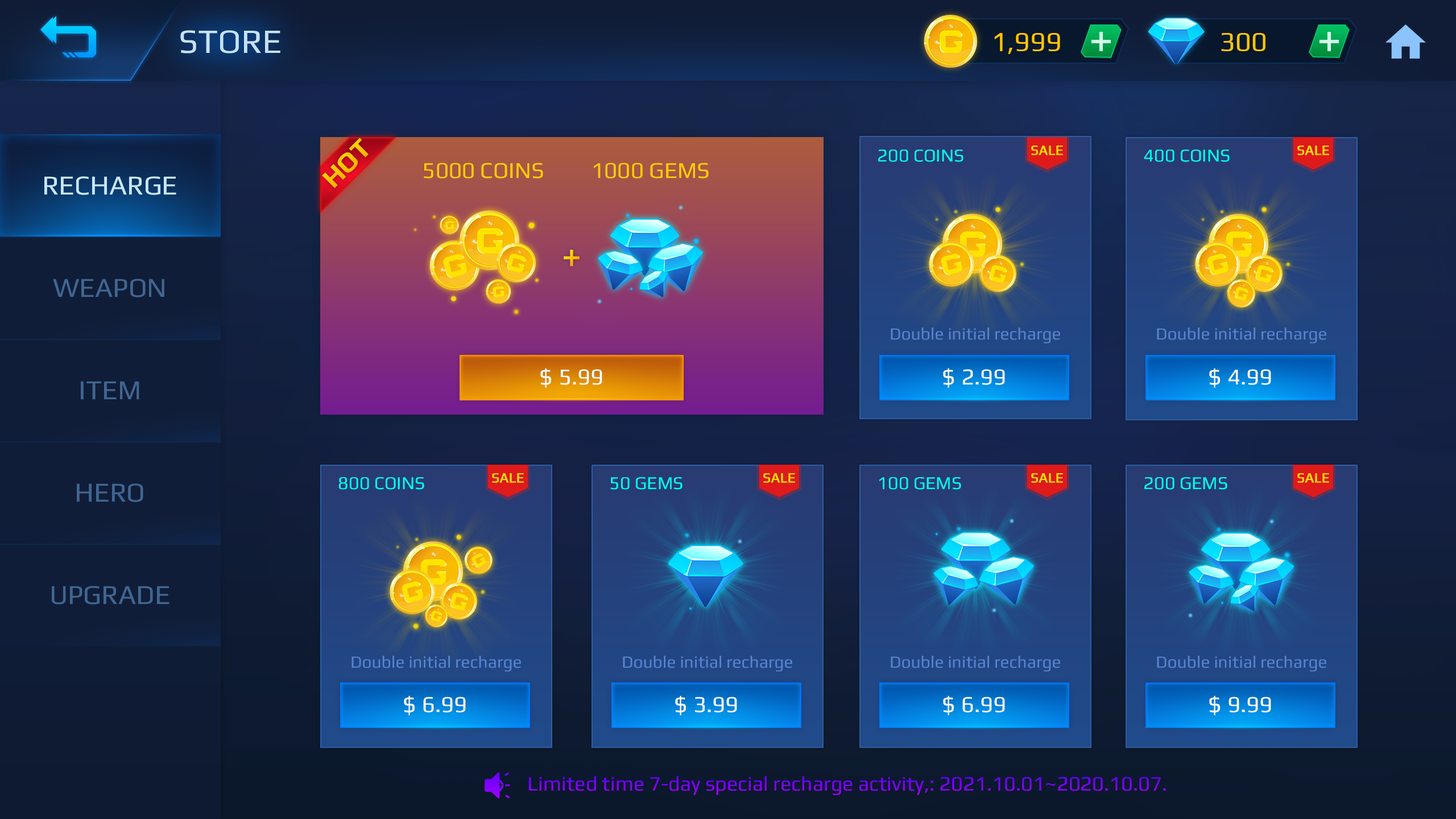
<style>
.page{position:relative;width:1456px;height:819px}
.page>*{position:absolute;margin:0}
.t1{font:34.1px "Play-Regular";color:#c6e1fc}
.t2{font:27.3px "Play-Regular";color:#ffc600}
.t3{font:27.3px "Play-Bold";color:#ffd200}
.t4{font:18.2px "Play-Regular";color:#00fff0}
.t5{font:13.6px "Play-Regular";color:#ffe400;font-weight:bold}
.t6{font:22.7px "Play-Regular";color:#ffcd00}
.t7{font:22.7px "Play-Regular";color:#ffcd01}
.t8{font:27.3px "Play-Regular";color:#c8e7ff}
.t9{font:40.9px "Play-Regular"}
.t10{font:27.3px "Play-Regular";color:#406691}
.t11{font:17.1px "Play-Regular";color:#5684cf}
.t12{font:22.7px "Play-Regular";color:#ffffff}
.t13{font:20.5px "Play-Regular";color:#7e00ff}
</style>
<div class="page">
<p class="t1" style="left:180px;top:30px;width:100px;height:23px">STORE</p>
<p class="t2" style="left:994px;top:33px;width:66px;height:21px">1,999</p>
<p class="t2" style="left:1221px;top:33px;width:44px;height:18px">300</p>
<p class="t3" style="left:322px;top:138px;width:47px;height:50px;rotate:-45deg">HOT</p>
<p class="t4" style="left:878px;top:150px;width:85px;height:12px">200 COINS</p>
<p class="t5" style="left:1031px;top:146px;width:32px;height:9px">SALE</p>
<p class="t4" style="left:1144px;top:150px;width:86px;height:12px">400 COINS</p>
<p class="t5" style="left:1297px;top:146px;width:32px;height:9px">SALE</p>
<p class="t6" style="left:424px;top:163px;width:119px;height:16px">5000 COINS</p>
<p class="t7" style="left:594px;top:163px;width:115px;height:16px">1000 GEMS</p>
<p class="t8" style="left:44px;top:176px;width:132px;height:19px">RECHARGE</p>
<p class="t9" style="left:564px;top:250px;width:16px;height:16px">+</p>
<p class="t10" style="left:53px;top:279px;width:111px;height:18px">WEAPON</p>
<p class="t11" style="left:891px;top:328px;width:169px;height:16px">Double initial recharge</p>
<p class="t11" style="left:1157px;top:328px;width:169px;height:16px">Double initial recharge</p>
<p class="t12" style="left:540px;top:368px;width:62px;height:20px">$＄5.99</p>
<p class="t12" style="left:943px;top:368px;width:62px;height:20px">$＄2.99</p>
<p class="t12" style="left:1209px;top:368px;width:62px;height:20px">$＄4.99</p>
<p class="t10" style="left:81px;top:381px;width:58px;height:18px">ITEM</p>
<p class="t5" style="left:492px;top:473px;width:32px;height:10px">SALE</p>
<p class="t5" style="left:763px;top:473px;width:32px;height:10px">SALE</p>
<p class="t5" style="left:1031px;top:473px;width:32px;height:10px">SALE</p>
<p class="t5" style="left:1297px;top:473px;width:32px;height:10px">SALE</p>
<p class="t10" style="left:77px;top:483px;width:66px;height:19px">HERO</p>
<p class="t4" style="left:339px;top:477px;width:85px;height:13px">800 COINS</p>
<p class="t4" style="left:610px;top:477px;width:72px;height:13px">50 GEMS</p>
<p class="t4" style="left:879px;top:477px;width:82px;height:13px">100 GEMS</p>
<p class="t4" style="left:1144px;top:477px;width:83px;height:13px">200 GEMS</p>
<p class="t10" style="left:52px;top:586px;width:117px;height:19px">UPGRADE</p>
<p class="t11" style="left:351px;top:656px;width:170px;height:16px">Double initial recharge</p>
<p class="t11" style="left:623px;top:656px;width:169px;height:16px">Double initial recharge</p>
<p class="t11" style="left:891px;top:656px;width:169px;height:16px">Double initial recharge</p>
<p class="t11" style="left:1157px;top:656px;width:169px;height:16px">Double initial recharge</p>
<p class="t12" style="left:404px;top:696px;width:62px;height:19px">$＄6.99</p>
<p class="t12" style="left:675px;top:696px;width:62px;height:19px">$＄3.99</p>
<p class="t12" style="left:943px;top:696px;width:62px;height:19px">$＄6.99</p>
<p class="t12" style="left:1209px;top:696px;width:62px;height:19px">$＄9.99</p>
<p class="t13" style="left:529px;top:776px;width:637px;height:19px">Limited time 7-day special recharge activity,: 2021.10.01~2020.10.07.</p>
</div>
